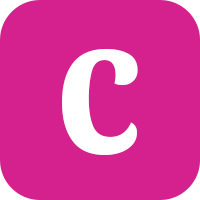
<style>
.page{position:relative;width:200px;height:200px;background:#d4218d}
.page>*{position:absolute;margin:0}
.t1{font:150px "Sansita-Bold";color:#ffffff}
</style>
<div class="page">
<p class="t1" style="left:62px;top:49px;width:76px;height:106px">C</p>
</div>
